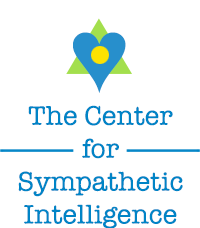
<style>
.page{position:relative;width:200px;height:228px;background:#ffffff}
.page>*{position:absolute;margin:0}
.t1{font:105.9px "CourierNewPS-BoldMT";color:#278fcc}
.t2{font:27.4px "AmericanTypewriter";color:#0084c6}
</style>
<div class="page">
<p class="t1" style="left:73px;top:32px;width:53px;height:61px">♥︎</p>
<p class="t2" style="left:18px;top:105px;width:165px;height:124px;text-align:center">The Center<br>for<br>Sympathetic<br>Intelligence</p>
</div>
